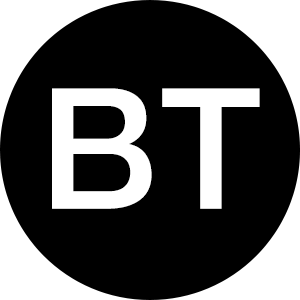
<style>
.page{position:relative;width:300px;height:300px;background:#000000}
.page>*{position:absolute;margin:0}
.t1{font:168px "HelveticaNeue-Medium";letter-spacing:0.02em;color:#ffffff}
</style>
<div class="page">
<p class="t1" style="left:52px;top:88px;width:208px;height:121px">BT</p>
</div>
